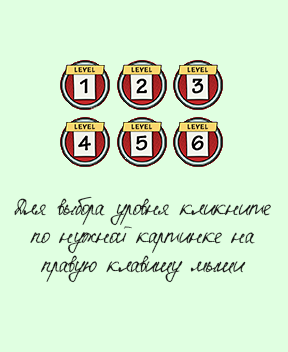
<style>
.page{position:relative;width:288px;height:352px;background:#e0ffe1}
.page>*{position:absolute;margin:0}
.t1{font:24px "Eskal-Font4You";color:#181716}
</style>
<div class="page">
<p class="t1" style="left:14px;top:196px;width:257px;height:87px;text-align:center">Для выбора уровня кликните<br>по нужной картинке на правую клавишу мыши</p>
</div>
